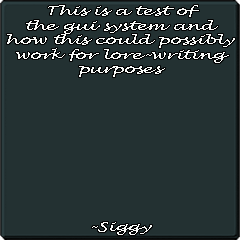
<style>
.page{position:relative;width:240px;height:240px;background:#233132}
.page>*{position:absolute;margin:0}
.t1{font:12px "LucidaHandwriting-Italic";color:#f9fbf9;scale:1.5 1}
</style>
<div class="page">
<p class="t1" style="left:7px;top:5px;width:228px;height:230px;text-align:center">This is a test of<br>the gui system and<br>how this could possibly<br>work for lore-writing<br>purposes<br><br><br><br><br><br><br><br><br><br><br>-Siggy</p>
</div>
